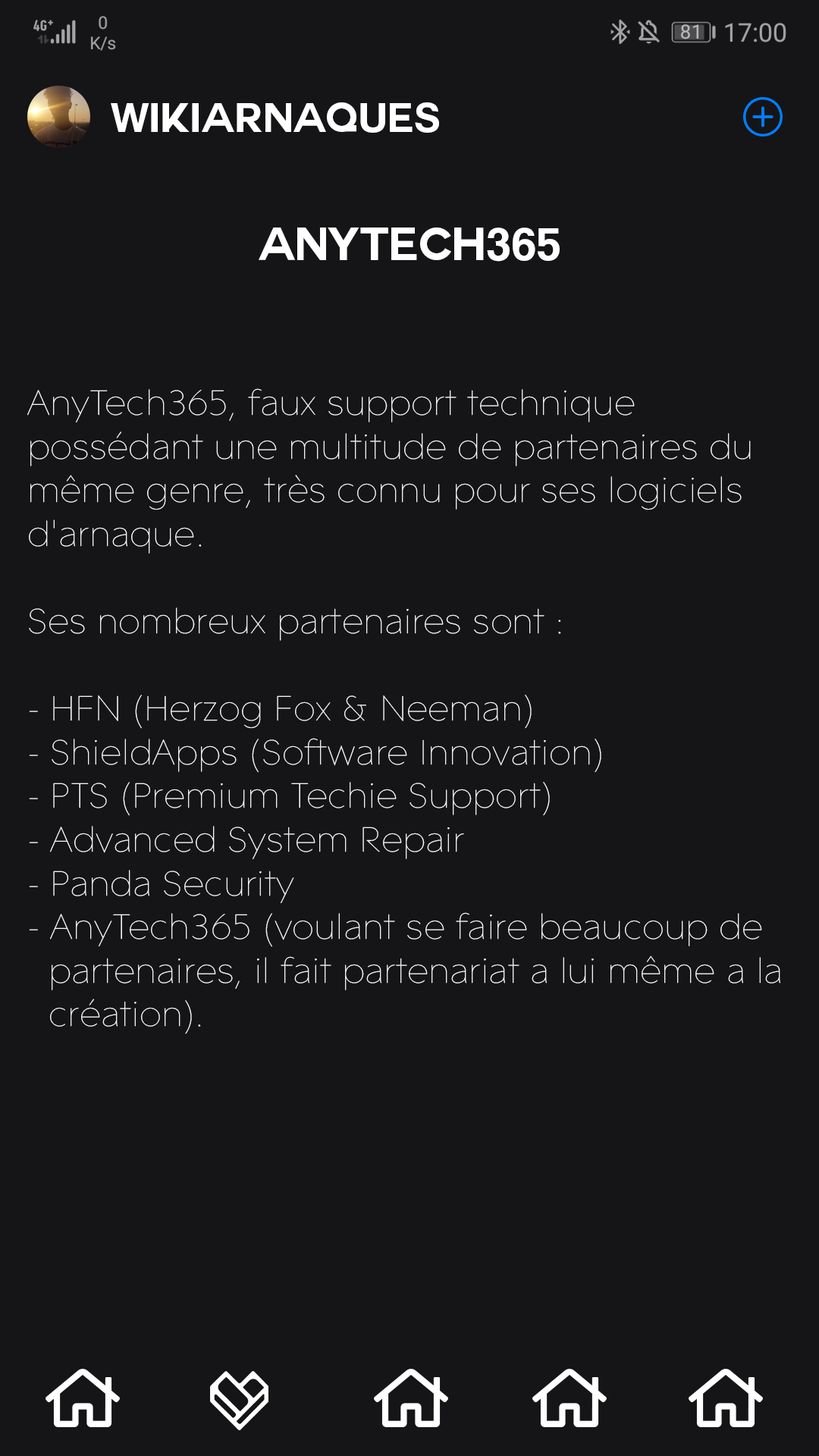
<style>
.page{position:relative;width:819px;height:1456px;background:#151517}
.page>*{position:absolute;margin:0}
.t1{font:40.5px "Couture-Bold";color:#ffffff}
.t2{font:45.5px "Couture-Bold";color:#ffffff}
.t3{font:36.4px "ContaxW01-25UltraLight";color:#ffffff}
</style>
<div class="page">
<p class="t1" style="left:111px;top:102px;width:328px;height:31px">WikiArnaques</p>
<p class="t2" style="left:259px;top:227px;width:301px;height:35px">AnyTech365</p>
<p class="t3" style="left:27px;top:388px;width:753px;height:646px">AnyTech365, faux support technique <br>possédant une multitude de partenaires du <br>même genre, très connu pour ses logiciels <br>d'arnaque.<br><br>Ses nombreux partenaires sont :<br><br>- HFN (Herzog Fox &amp; Neeman)<br>- ShieldApps (Software Innovation)<br>- PTS (Premium Techie Support)<br>- Advanced System Repair<br>- Panda Security<br>- AnyTech365 (voulant se faire beaucoup de <br>  partenaires, il fait partenariat a lui même a la<br>  création).</p>
</div>
